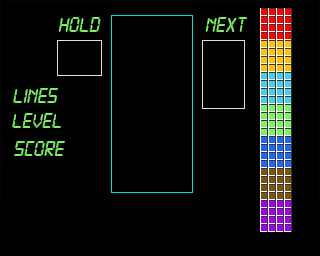
<style>
.page{position:relative;width:320px;height:256px;background:#000000}
.page>*{position:absolute;margin:0}
.t1{font:22px "Digital-7";color:#7def63;font-style:italic}
</style>
<div class="page">
<p class="t1" style="left:58px;top:17px;width:43px;height:15px">HOLD</p>
<p class="t1" style="left:205px;top:17px;width:42px;height:15px">NEXT</p>
<p class="t1" style="left:13px;top:88px;width:46px;height:15px">LINES</p>
<p class="t1" style="left:12px;top:113px;width:49px;height:15px">LEVEL</p>
<p class="t1" style="left:14px;top:141px;width:51px;height:15px">SCORE</p>
</div>
